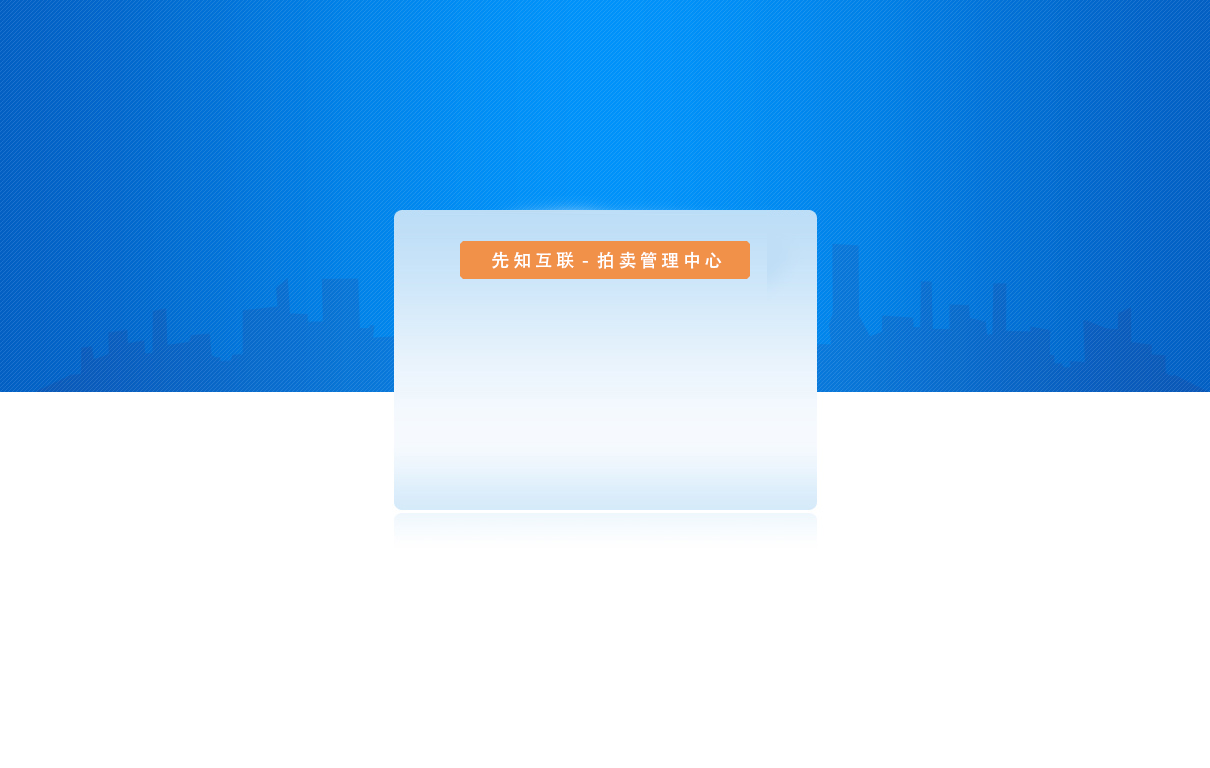
<style>
.page{position:relative;width:1210px;height:768px;background:#ffffff}
.page>*{position:absolute;margin:0}
.t1{font:18px "AdobeHeitiStd-Regular";letter-spacing:0.2em;color:#ffffff}
</style>
<div class="page">
<p class="t1" style="left:492px;top:251px;width:230px;height:18px">先知互联-拍卖管理中心</p>
</div>
